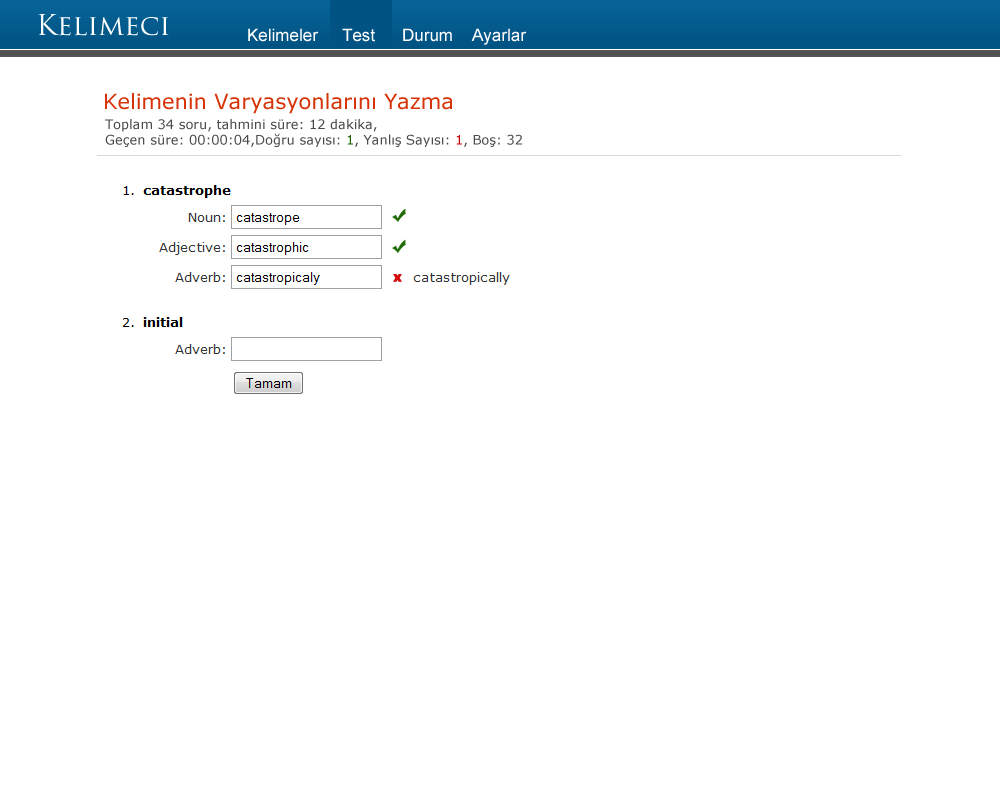
<style>
.page{position:relative;width:1000px;height:800px;background:#ffffff}
.page>*{position:absolute;margin:0}
.t1{font:28px "TrajanPro-Regular";color:#ffffff}
.t2{font:17px "ArialMT";color:#ffffff}
.t3{font:21px "Verdana";color:#d63408}
.t4{font:13px "Verdana";color:#4a4a4a}
.t5{font:13px "Verdana";color:#196003}
.t6{font:13px "Verdana";color:#c70505}
</style>
<div class="page">
<p class="t1" style="left:38px;top:14px;width:131px;height:22px">Kelimeci</p>
<p class="t2" style="left:248px;top:28px;width:71px;height:14px">Kelimeler</p>
<p class="t2" style="left:342px;top:28px;width:33px;height:14px">Test</p>
<p class="t2" style="left:403px;top:28px;width:49px;height:14px">Durum</p>
<p class="t2" style="left:471px;top:28px;width:56px;height:17px">Ayarlar</p>
<p class="t3" style="left:105px;top:93px;width:347px;height:21px">Kelimenin Varyasyonlarını Yazma</p>
<p class="t4" style="left:105px;top:119px;width:418px;height:28px">Toplam 34 soru, tahmini süre: 12 dakika,<br>Geçen süre: 00:00:04,Doğru sayısı: <span class="t5">1</span>, Yanlış Sayısı: <span class="t6">1</span>, Boş: 32</p>
</div>
